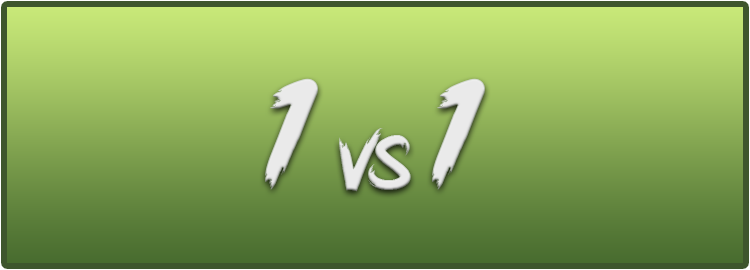
<style>
.page{position:relative;width:750px;height:270px}
.page>*{position:absolute;margin:0}
.t1{font:86.1px "PinkBlue";color:#eaeaea}
.t2{font:163.9px "PinkBlue";color:#eaeaea}
</style>
<div class="page">
<p class="t1" style="left:265px;top:78px;width:220px;height:114px"><span class="t2">1</span> vs <span class="t2">1</span></p>
</div>
